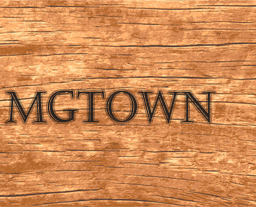
<style>
.page{position:relative;width:256px;height:207px}
.page>*{position:absolute;margin:0}
.t1{font:43.3px "Castellar";color:#252121;scale:0.88 1}
</style>
<div class="page">
<p class="t1" style="left:6px;top:91px;width:209px;height:32px">MgTown</p>
</div>
